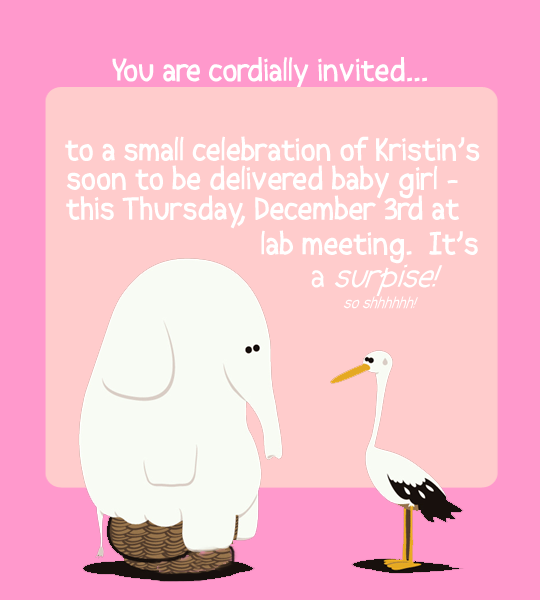
<style>
.page{position:relative;width:540px;height:600px;background:#ffcccc}
.page>*{position:absolute;margin:0}
.t1{font:32px "AbscissaBold";color:#ffffff}
.t2{font:32px "AbscissaItalic";color:#ffffff}
.t3{font:32px "Abscissa";color:#ffffff}
.t4{font:16px "AbscissaItalic";color:#ffffff}
</style>
<div class="page">
<p class="t1" style="left:112px;top:57px;width:315px;height:33px">You are cordially invited...</p>
<p class="t1" style="left:65px;top:136px;width:415px;height:26px">to a small celebration of Kristin’s</p>
<p class="t1" style="left:66px;top:165px;width:392px;height:34px">soon to be delivered baby girl -</p>
<p class="t1" style="left:66px;top:195px;width:393px;height:34px">this Thursday, December 3rd at</p>
<p class="t1" style="left:261px;top:230px;width:217px;height:34px">lab meeting.  It’s</p>
<p class="t2" style="left:311px;top:264px;width:132px;height:32px"><span class="t3">a </span>surpise!</p>
<p class="t4" style="left:343px;top:296px;width:75px;height:13px">so shhhhhh!</p>
</div>
